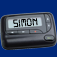
<style>
.page{position:relative;width:57px;height:57px;background:#002878}
.page>*{position:absolute;margin:0}
.t1{font:11px "Digital-7";letter-spacing:0.02em;color:#000000;font-weight:bold}
</style>
<div class="page">
<p class="t1" style="left:13px;top:18px;width:25px;height:10px;rotate:-5deg">SIMON</p>
</div>
